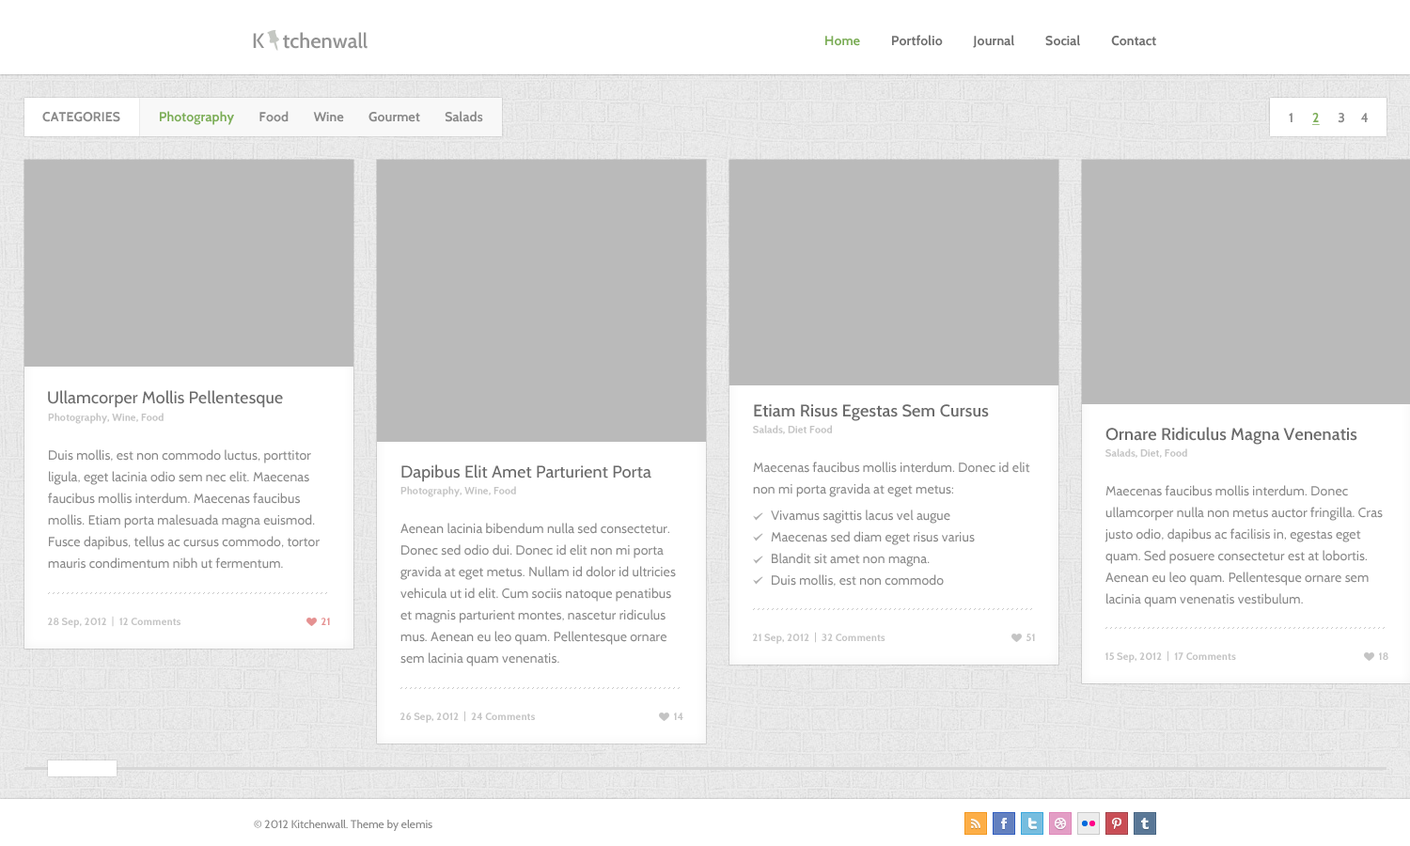
<style>
.page{position:relative;width:1410px;height:846px;background:#ffffff}
.page>*{position:absolute;margin:0}
.t1{font:20.7px "Cabin-Medium";color:#939393}
.t2{font:13.2px "Cabin-Bold";letter-spacing:0.01em;color:#707070}
.t3{font:13.2px "Cabin-Bold";letter-spacing:0.01em;color:#7dae59}
.t4{font:13.2px "Cabin-Bold";letter-spacing:0.01em;color:#898989;text-transform:uppercase}
.t5{font:13.2px "Cabin-Bold";letter-spacing:0.01em;color:#898989}
.t6{font:13.2px "Cabin-Bold";letter-spacing:0.01em;color:#7dae59;text-decoration:underline}
.t7{font:16.9px "Cabin-Regular";letter-spacing:0.01em;color:#6b6b6b}
.t8{font:10.3px "Cabin-Bold";letter-spacing:0.01em;color:#c4c4c4}
.t9{font:16.9px "Cabin-Medium";letter-spacing:0.01em;color:#6b6b6b}
.t10{font:13.2px/21.6px "Cabin-Regular";letter-spacing:0.01em;color:#898989}
.t11{font:10.3px "Cabin-Bold";letter-spacing:0.01em;color:#e59191}
.t12{font:11.3px "Cabin-Regular";color:#898989}
</style>
<div class="page">
<p class="t1" style="left:253px;top:32px;width:114px;height:17px">K    tchenwall</p>
<p class="t2" style="left:825px;top:35px;width:331px;height:13px"><span class="t3">Home          </span>Portfolio          Journal          Social          Contact</p>
<p class="t4" style="left:42px;top:112px;width:78px;height:10px">Categories</p>
<p class="t5" style="left:160px;top:111px;width:323px;height:14px"><span class="t3">Photography</span>        Food        Wine        Gourmet        Salads</p>
<p class="t5" style="left:1289px;top:113px;width:78px;height:12px">1      <span class="t6">2</span>      3     4</p>
<p class="t7" style="left:48px;top:390px;width:235px;height:18px">Ullamcorper Mollis Pellentesque</p>
<p class="t8" style="left:48px;top:413px;width:116px;height:11px">Photography, Wine, Food</p>
<p class="t9" style="left:754px;top:404px;width:235px;height:17px">Etiam Risus Egestas Sem Cursus</p>
<p class="t8" style="left:753px;top:425px;width:79px;height:9px">Salads, Diet Food</p>
<p class="t9" style="left:1105px;top:427px;width:252px;height:18px">Ornare Ridiculus Magna Venenatis</p>
<p class="t10" style="left:48px;top:449px;width:272px;height:120px">Duis mollis, est non commodo luctus, porttitor ligula, eget lacinia odio sem nec elit. Maecenas faucibus mollis interdum. Maecenas faucibus mollis. Etiam porta malesuada magna euismod. Fusce dapibus, tellus ac cursus commodo, tortor mauris condimentum nibh ut fermentum.</p>
<p class="t8" style="left:1105px;top:448px;width:82px;height:10px">Salads, Diet, Food</p>
<p class="t10" style="left:753px;top:461px;width:277px;height:36px">Maecenas faucibus mollis interdum. Donec id elit non mi porta gravida at eget metus:</p>
<p class="t7" style="left:401px;top:464px;width:250px;height:18px">Dapibus Elit Amet Parturient Porta</p>
<p class="t8" style="left:400px;top:486px;width:116px;height:11px">Photography, Wine, Food</p>
<p class="t10" style="left:1104px;top:485px;width:278px;height:122px">Maecenas faucibus mollis interdum. Donec ullamcorper nulla non metus auctor fringilla. Cras justo odio, dapibus ac facilisis in, egestas eget quam. Sed posuere consectetur est at lobortis. Aenean eu leo quam. Pellentesque ornare sem lacinia quam venenatis vestibulum.</p>
<p class="t10" style="left:771px;top:509px;width:204px;height:77px">Vivamus sagittis lacus vel augue<br>Maecenas sed diam eget risus varius<br>Blandit sit amet non magna. <br>Duis mollis, est non commodo</p>
<p class="t10" style="left:400px;top:523px;width:276px;height:143px">Aenean lacinia bibendum nulla sed consectetur. Donec sed odio dui. Donec id elit non mi porta gravida at eget metus. Nullam id dolor id ultricies vehicula ut id elit. Cum sociis natoque penatibus et magnis parturient montes, nascetur ridiculus mus. Aenean eu leo quam. Pellentesque ornare sem lacinia quam venenatis.</p>
<p class="t8" style="left:48px;top:616px;width:132px;height:12px">28 Sep, 2012  |  12 Comments</p>
<p class="t11" style="left:321px;top:617px;width:9px;height:8px">21</p>
<p class="t8" style="left:753px;top:632px;width:132px;height:12px">21 Sep, 2012  |  32 Comments</p>
<p class="t8" style="left:1026px;top:633px;width:9px;height:8px">51</p>
<p class="t8" style="left:1105px;top:650px;width:131px;height:13px">15 Sep, 2012  |  17 Comments</p>
<p class="t8" style="left:1379px;top:652px;width:9px;height:8px">18</p>
<p class="t8" style="left:400px;top:711px;width:135px;height:12px">26 Sep, 2012  |  24 Comments</p>
<p class="t8" style="left:674px;top:712px;width:9px;height:8px">14</p>
<p class="t12" style="left:254px;top:820px;width:178px;height:11px">© 2012 Kitchenwall. Theme by elemis</p>
</div>
